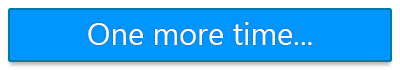
<style>
.page{position:relative;width:400px;height:70px;background:#0096ff}
.page>*{position:absolute;margin:0}
.t1{font:30.9px "SegoeUI";color:#ffffff}
</style>
<div class="page">
<p class="t1" style="left:88px;top:22px;width:224px;height:23px">One more time...</p>
</div>
